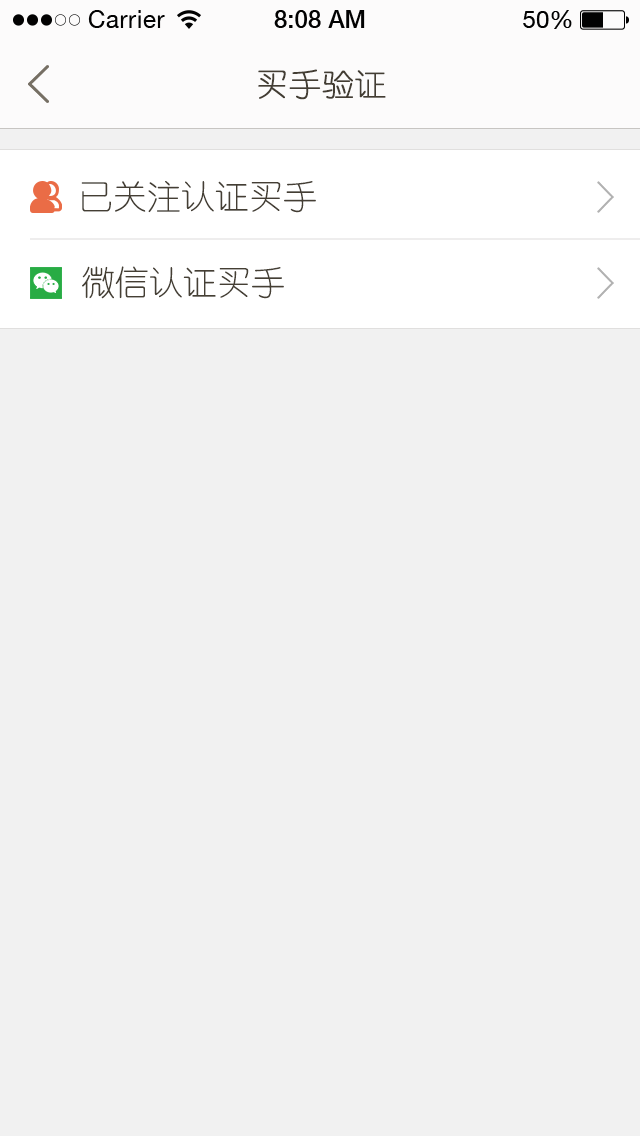
<style>
.page{position:relative;width:640px;height:1136px;background:#f1f1f1}
.page>*{position:absolute;margin:0}
.t1{font:32px "YouYuan";color:#433d33;text-transform:uppercase;font-weight:bold}
.t2{font:34px "YouYuan";color:#443e34;text-transform:uppercase}
.t3{font:34px "YouYuan";color:#453f34;text-transform:uppercase}
</style>
<div class="page">
<p class="t1" style="left:258px;top:69px;width:128px;height:31px">买手验证</p>
<p class="t2" style="left:81px;top:181px;width:235px;height:32px">已关注认证买手</p>
<p class="t3" style="left:82px;top:266px;width:202px;height:33px">微信认证买手</p>
</div>
